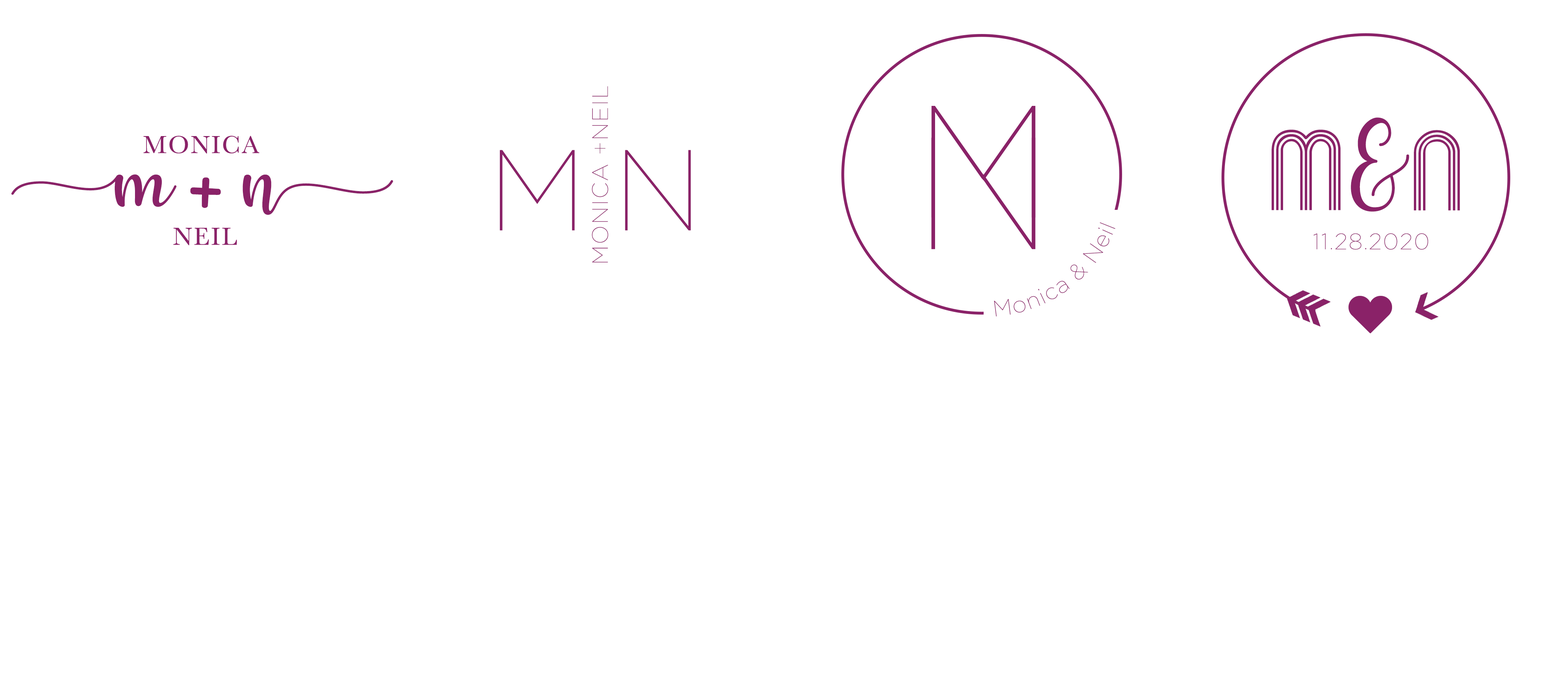
<style>
.page{position:relative;width:1568px;height:688px;background:#ffffff}
.page>*{position:absolute;margin:0}
.t1{font:22.3px "Gotham-Thin";letter-spacing:0.06em;color:#8a2268}
.t2{font:114.7px "HelloRegular";letter-spacing:0.06em;color:#8a2268}
.t3{font:25.5px "Baskerville";letter-spacing:0.06em;color:#8a2268}
.t4{font:114.7px "Mexcellent";letter-spacing:0.06em;color:#8a2268}
.t5{font:114.7px "Gotham-Thin";letter-spacing:0.06em;color:#8a2268}
.t6{font:95.6px "HelloRegular";letter-spacing:0.06em;color:#8a2268}
</style>
<div class="page">
<p class="t1" style="left:592px;top:86px;width:16px;height:177px;rotate:-90deg">MONICA +NEIL</p>
<p class="t2" style="left:1351px;top:117px;width:58px;height:95px">&amp;</p>
<p class="t3" style="left:143px;top:136px;width:116px;height:110px;text-align:center">MONICA <br><br><br>NEIL</p>
<p class="t4" style="left:1272px;top:130px;width:69px;height:80px">M</p>
<p class="t4" style="left:1414px;top:130px;width:46px;height:81px">N</p>
<p class="t5" style="left:500px;top:150px;width:75px;height:81px">M</p>
<p class="t5" style="left:625px;top:150px;width:66px;height:81px">N</p>
<p class="t6" style="left:11px;top:174px;width:382px;height:41px">m  n</p>
<p class="t6" style="left:190px;top:177px;width:31px;height:31px">+</p>
<p class="t1" style="left:994px;top:222px;width:122px;height:95px;rotate:-39deg">Monica &amp; Neil</p>
<p class="t1" style="left:1313px;top:233px;width:115px;height:17px">11.28.2020</p>
</div>
